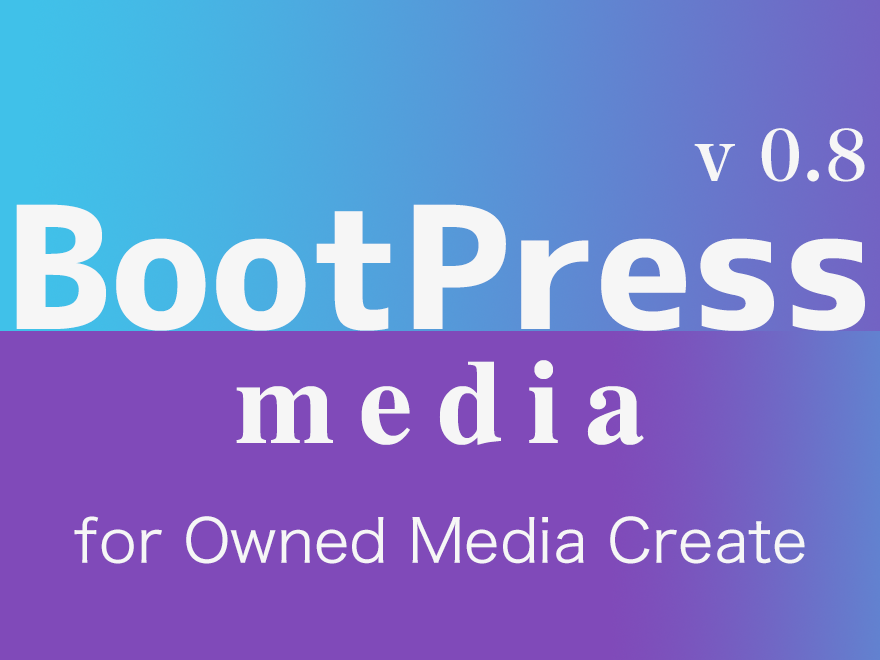
<style>
.page{position:relative;width:880px;height:660px;background:#804ab9}
.page>*{position:absolute;margin:0}
.t1{font:70px "HiraMinProN-W6";color:#f6f6f6}
.t2{font:170px "Corporate-Logo-Bold";color:#f6f6f6}
.t3{font:120px "Times-Bold";letter-spacing:0.2em;color:#f6f6f6}
.t4{font:60px "HiraKakuPro-W3";color:#f6f6f6}
</style>
<div class="page">
<p class="t1" style="left:694px;top:128px;width:171px;height:54px">v 0.8</p>
<p class="t2" style="left:16px;top:204px;width:849px;height:127px">BootPress</p>
<p class="t3" style="left:236px;top:360px;width:408px;height:85px">media</p>
<p class="t4" style="left:74px;top:516px;width:731px;height:48px">for Owned Media Create</p>
</div>
